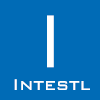
<style>
.page{position:relative;width:100px;height:100px;background:#006bb6}
.page>*{position:absolute;margin:0}
.t1{font:68.2px "MicrosoftYaHei";color:#ffffff}
.t2{font:20.4px "712-CAI978";color:#ffffff}
</style>
<div class="page">
<p class="t1" style="left:47px;top:15px;width:7px;height:53px">I</p>
<p class="t2" style="left:14px;top:79px;width:76px;height:11px">Intestl</p>
</div>
